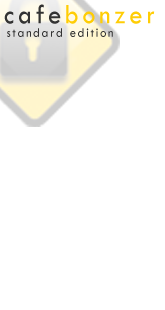
<style>
.page{position:relative;width:165px;height:310px;background:#ffffff}
.page>*{position:absolute;margin:0}
.t1{font:28.7px "TwCenMT-Regular";letter-spacing:0.2em;color:#ffcd05;scale:0.9 1}
.t2{font:28.7px "TwCenMT-Regular";letter-spacing:0.2em;color:#333333;scale:0.9 1}
.t3{font:13.5px "TwCenMT-Regular";letter-spacing:0.2em;color:#333333;scale:0.9 1}
</style>
<div class="page">
<p class="t1" style="left:4px;top:4px;width:151px;height:20px"><span class="t2">cafe</span>bonzer</p>
<p class="t3" style="left:7px;top:28px;width:106px;height:9px">standard edition</p>
</div>
